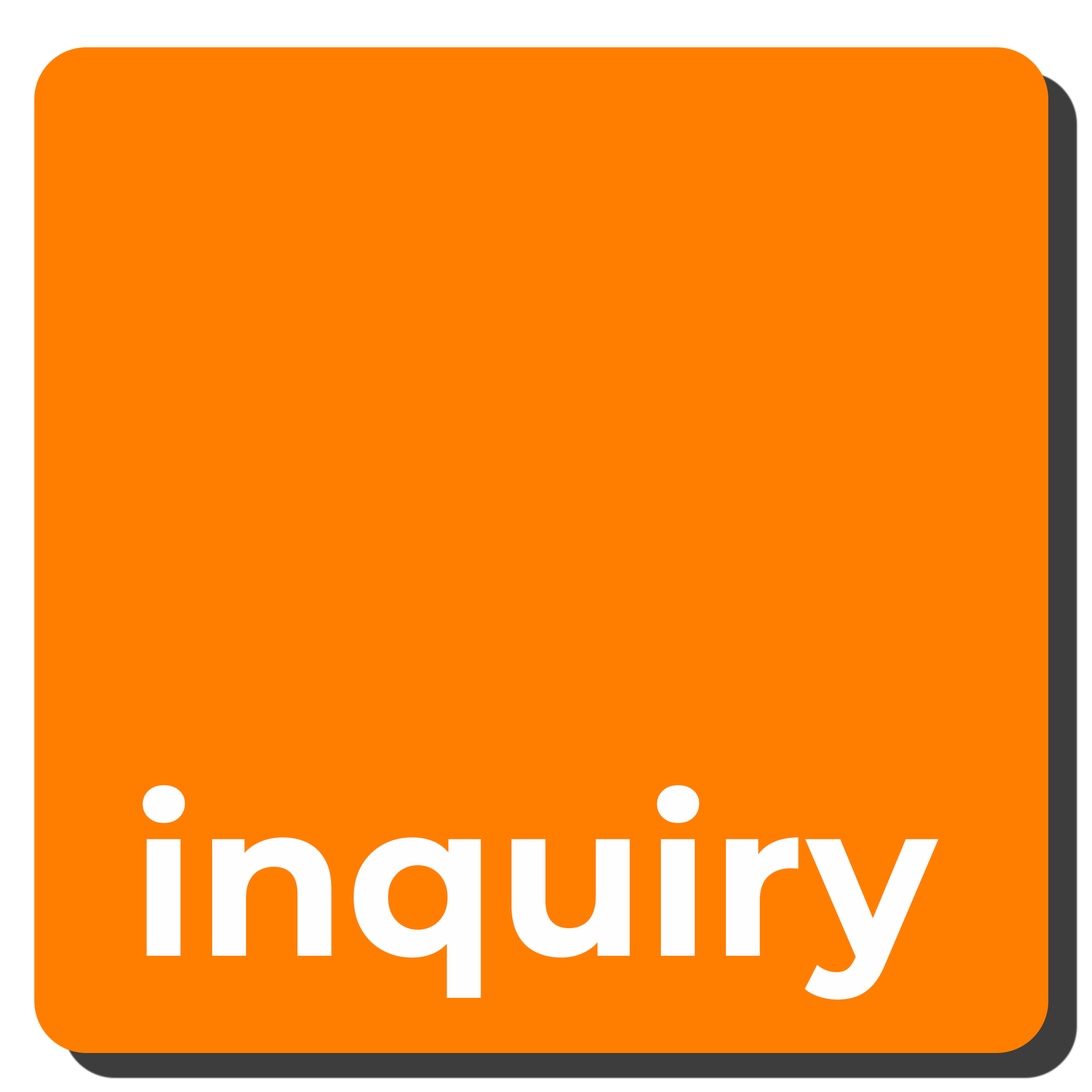
<style>
.page{position:relative;width:1092px;height:1092px;background:#ff7e00}
.page>*{position:absolute;margin:0}
.t1{font:216.7px "Montserrat-Bold";color:#fefefe}
</style>
<div class="page">
<p class="t1" style="left:142px;top:785px;width:797px;height:215px">inquiry</p>
</div>
